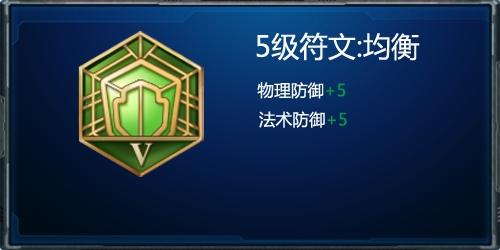
<style>
.page{position:relative;width:500px;height:250px}
.page>*{position:absolute;margin:0}
.t1{font:28.3px "MicrosoftYaHei";color:#f7faf8}
.t2{font:16.7px "MicrosoftYaHei";color:#f7faf8}
.t3{font:16.7px "MicrosoftYaHei";color:#009944}
</style>
<div class="page">
<p class="t1" style="left:256px;top:32px;width:164px;height:96px;text-align:center">5级符文:均衡<br><span class="t2">        物理防御</span><span class="t3">+5<br></span><span class="t2">  法术防御</span><span class="t3">+5</span></p>
</div>
